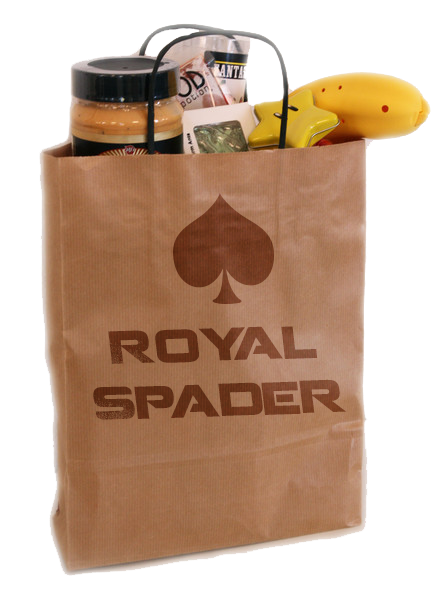
<style>
.page{position:relative;width:445px;height:600px;background:#ffffff}
.page>*{position:absolute;margin:0}
.t1{font:46.2px "Coalition";color:#68331a}
</style>
<div class="page">
<p class="t1" style="left:93px;top:326px;width:254px;height:94px;text-align:center;rotate:-2deg">Royal<br>Spader</p>
</div>
